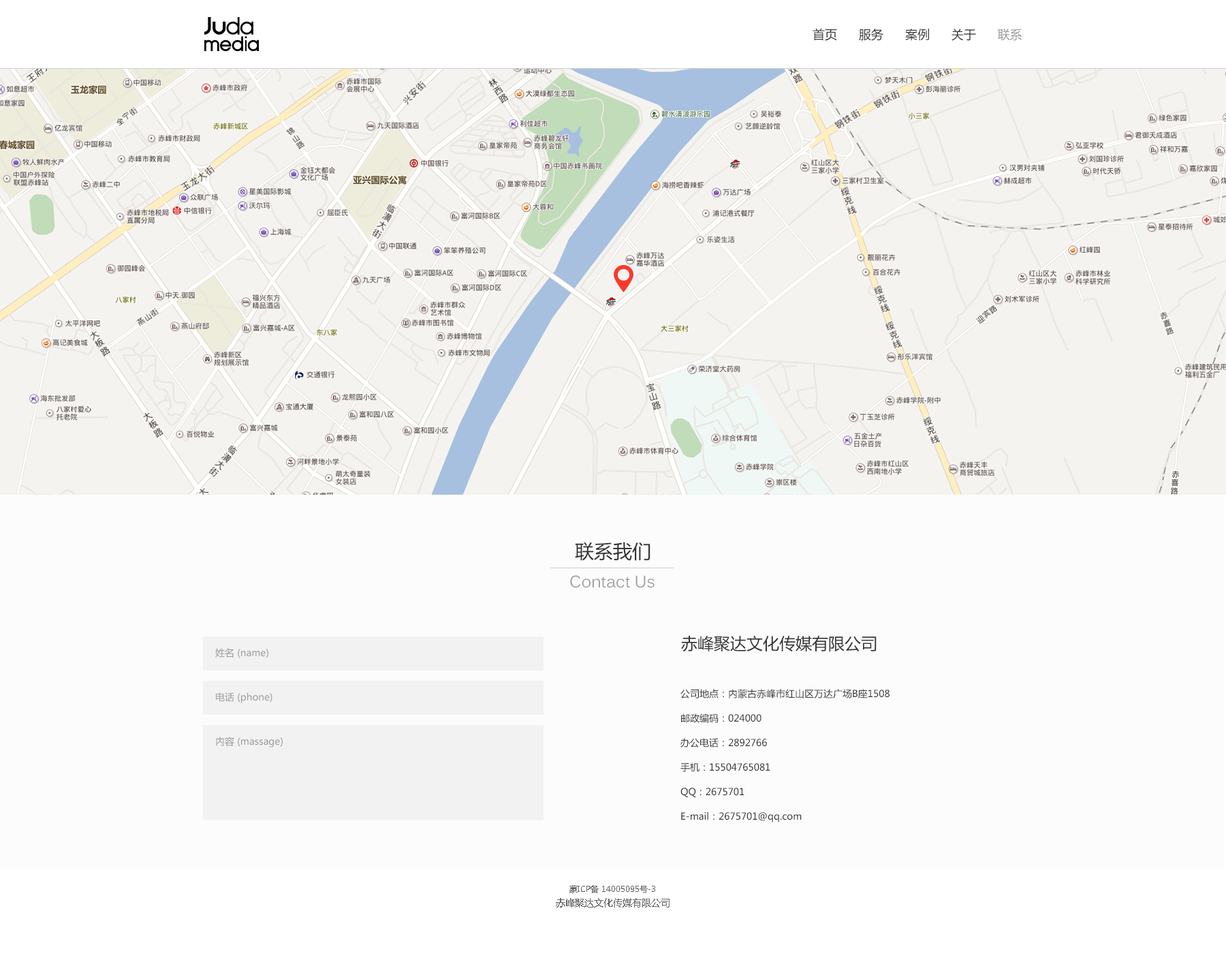
<style>
.page{position:relative;width:1226px;height:973px;background:#fcfcfc}
.page>*{position:absolute;margin:0}
.t1{font:12.3px "MicrosoftYaHei";color:#333333}
.t2{font:12.3px "MicrosoftYaHei";color:#999999}
.t3{font:19.1px "MicrosoftYaHei";color:#333333}
.t4{font:16.3px "Kalinga";color:#999999}
.t5{font:16.3px "MicrosoftYaHei";color:#333333}
.t6{font:9.5px "MicrosoftYaHei";color:#999999}
.t7{font:9.5px/24.5px "MicrosoftYaHei";color:#333333}
.t8{font:8.2px "MicrosoftYaHei";color:#666666}
.t9{font:9.5px "MicrosoftYaHei";color:#666666}
</style>
<div class="page">
<p class="t1" style="left:813px;top:28px;width:209px;height:13px">首页      服务      案例      关于      <span class="t2">联系</span></p>
<p class="t3" style="left:575px;top:541px;width:75px;height:20px">联系我们</p>
<p class="t4" style="left:570px;top:575px;width:85px;height:13px">Contact Us</p>
<p class="t5" style="left:681px;top:635px;width:196px;height:17px">赤峰聚达文化传媒有限公司</p>
<p class="t6" style="left:215px;top:648px;width:53px;height:10px">姓名 (name)</p>
<p class="t7" style="left:680px;top:689px;width:210px;height:133px">公司地点：内蒙古赤峰市红山区万达广场B座1508<br>邮政编码：024000<br>办公电话：2892766<br>手机：15504765081<br>QQ：2675701<br>E-mail：2675701@qq.com</p>
<p class="t6" style="left:216px;top:692px;width:56px;height:11px">电话 (phone)</p>
<p class="t6" style="left:216px;top:736px;width:67px;height:11px">内容 (massage)</p>
<p class="t8" style="left:569px;top:885px;width:86px;height:8px">蒙ICP备 14005095号-3</p>
<p class="t9" style="left:556px;top:898px;width:114px;height:9px">赤峰聚达文化传媒有限公司</p>
</div>
